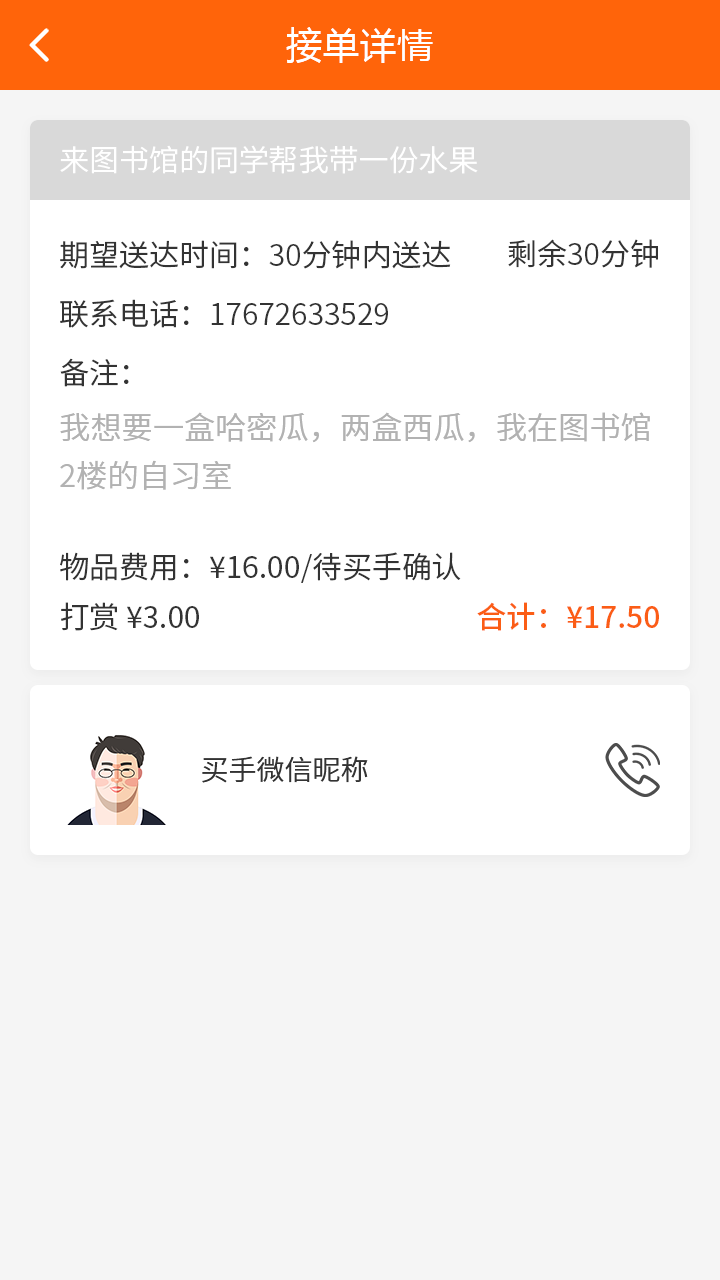
<style>
.page{position:relative;width:720px;height:1280px;background:#ffffff}
.page>*{position:absolute;margin:0}
.t1{font:36px "MicrosoftYaHei";letter-spacing:0.03em;color:#ffffff}
.t2{font:30px "NotoSansCJKsc-DemiLight";color:#ffffff}
.t3{font:30px "NotoSansCJKsc-DemiLight";color:#333333}
.t4{font:31.2px/48px "NotoSansCJKsc-DemiLight";color:#b2b2b2}
.t5{font:30px "NotoSansCJKsc-Regular";color:#333333}
.t6{font:30px "NotoSansCJKsc-Medium";color:#fb5d15}
.t7{font:28px "NotoSansCJKsc-DemiLight";color:#333333;font-variant:small-caps}
</style>
<div class="page">
<p class="t1" style="left:286px;top:27px;width:147px;height:36px">接单详情</p>
<p class="t2" style="left:60px;top:145px;width:418px;height:29px">来图书馆的同学帮我带一份水果</p>
<p class="t3" style="left:60px;top:240px;width:391px;height:29px">期望送达时间：30分钟内送达</p>
<p class="t3" style="left:508px;top:239px;width:150px;height:29px">剩余30分钟</p>
<p class="t3" style="left:60px;top:299px;width:328px;height:29px">联系电话：17672633529</p>
<p class="t3" style="left:60px;top:358px;width:69px;height:29px">备注：</p>
<p class="t4" style="left:60px;top:412px;width:590px;height:78px">我想要一盒哈密瓜，两盒西瓜，我在图书馆2楼的自习室</p>
<p class="t5" style="left:60px;top:552px;width:401px;height:31px"><span class="t3">物品费用：</span>¥16.00<span class="t3">/待买手确认</span></p>
<p class="t5" style="left:61px;top:602px;width:138px;height:29px"><span class="t3">打赏 </span>¥3.00</p>
<p class="t6" style="left:477px;top:602px;width:182px;height:29px">合计：¥17.50</p>
<p class="t7" style="left:202px;top:756px;width:166px;height:27px">买手微信昵称</p>
</div>
